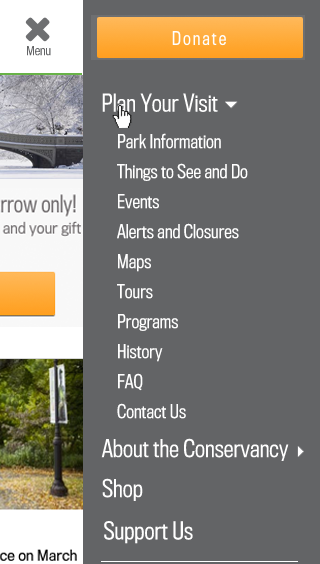
<style>
.page{position:relative;width:320px;height:564px;background:#636466}
.page>*{position:absolute;margin:0}
.t1{font:18px/30px "TitlingGothicCond-Regular";color:#ffffff}
</style>
<div class="page">
<p class="t1" style="left:117px;top:133px;width:131px;height:286px">Park Information<br>Things to See and Do<br>Events<br>Alerts and Closures<br>Maps<br>Tours<br>Programs<br>History<br>FAQ<br>Contact Us</p>
</div>
